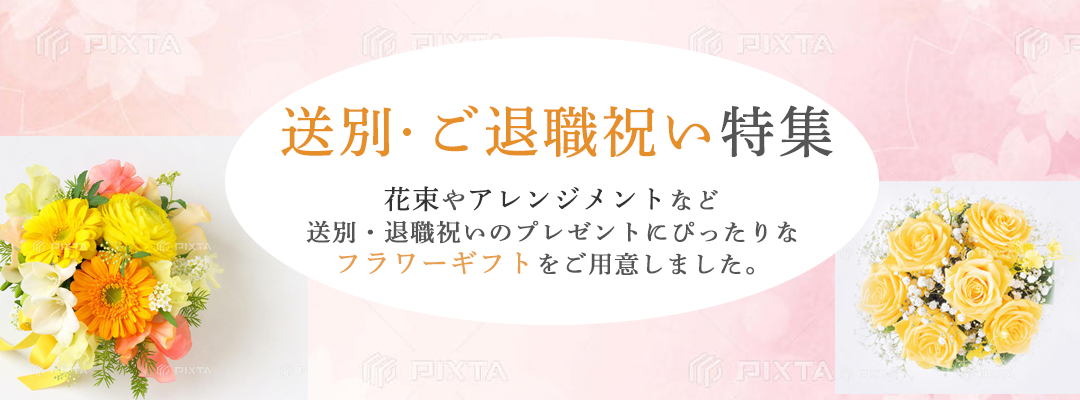
<style>
.page{position:relative;width:1080px;height:400px;background:#ffffff}
.page>*{position:absolute;margin:0}
.t1{font:54.7px "DNPShueiMinPr6-M";letter-spacing:0.05em;color:#e68e27;font-weight:bold}
.t2{font:54.7px "DNPShueiMinPr6-M";letter-spacing:0.05em;color:#555555;font-weight:bold}
.t3{font:24px/32px "DNPShueiMinPr6-M";letter-spacing:0.05em;color:#555555;font-weight:bold}
.t4{font:26.7px/29.2px "DNPShueiMinPr6-M";letter-spacing:0.05em;color:#333333;font-weight:bold}
.t5{font:24px/29.2px "DNPShueiMinPr6-M";letter-spacing:0.05em;color:#555555;font-weight:bold}
.t6{font:26.7px/32px "DNPShueiMinPr6-M";letter-spacing:0.05em;color:#333333;font-weight:bold}
.t7{font:26.7px/32px "DNPShueiMinPr6-M";letter-spacing:0.05em;color:#e99e4d;font-weight:bold}
</style>
<div class="page">
<p class="t1" style="left:281px;top:105px;width:552px;height:53px">送別  ご退職祝い<span class="t2">特集</span></p>
<p class="t3" style="left:306px;top:186px;width:491px;height:89px;text-align:center"><span class="t4">花束</span><span class="t5">や</span><span class="t4">アレンジ</span><span class="t6">メント</span>など<br>送別・退職祝いのプレゼントにぴったりな<br><span class="t7">フラワーギフト</span>をご用意しました。</p>
</div>
